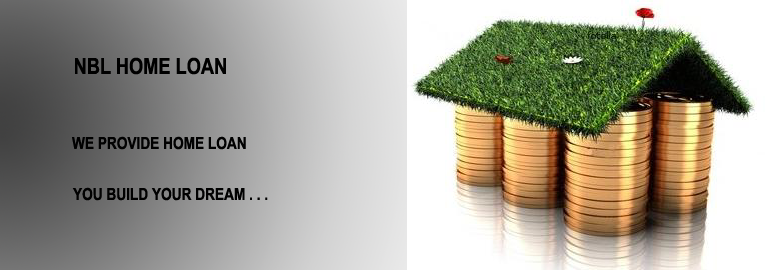
<style>
.page{position:relative;width:780px;height:270px}
.page>*{position:absolute;margin:0}
.t1{font:22.2px "ArialNarrow-Bold";color:#000000;text-transform:uppercase}
.t2{font:16.7px "ArialNarrow-Bold";color:#010101;text-transform:uppercase}
</style>
<div class="page">
<p class="t1" style="left:75px;top:57px;width:151px;height:18px">nbl home loan</p>
<p class="t2" style="left:72px;top:136px;width:174px;height:14px">We provide home loan</p>
<p class="t2" style="left:72px;top:187px;width:196px;height:14px">you build your dream . . .</p>
</div>
